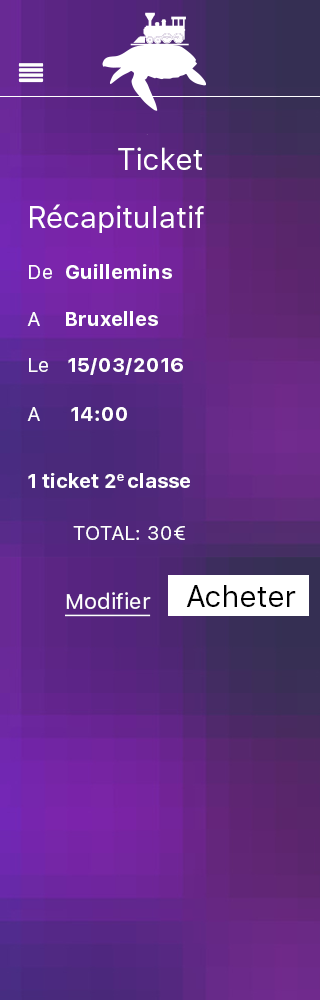
<style>
.page{position:relative;width:320px;height:1000px}
.page>*{position:absolute;margin:0}
.t1{font:30px "SFUIText-Regular";color:#ffffff}
.t2{font:20px "SFUIText-Bold";color:#ffffff}
.t3{font:20px "SFUIText-Regular";color:#ffffff}
.t4{font:22px "SFUIText-Regular";color:#ffffff;text-decoration:underline}
.t5{font:30px "SFUIText-Regular";color:#000000}
</style>
<div class="page">
<p class="t1" style="left:118px;top:147px;width:84px;height:23px">Ticket</p>
<p class="t1" style="left:30px;top:204px;width:174px;height:29px">Récapitulatif</p>
<p class="t2" style="left:29px;top:264px;width:143px;height:15px"><span class="t3">De  </span>Guillemins</p>
<p class="t2" style="left:27px;top:311px;width:131px;height:15px"><span class="t3">A    </span>Bruxelles</p>
<p class="t2" style="left:29px;top:358px;width:154px;height:17px"><span class="t3">Le   </span>15/03/2016</p>
<p class="t2" style="left:27px;top:407px;width:100px;height:14px"><span class="t3">A     </span>14:00</p>
<p class="t2" style="left:28px;top:473px;width:162px;height:15px">1 ticket 2e classe</p>
<p class="t3" style="left:73px;top:526px;width:112px;height:14px">TOTAL: 30€</p>
<p class="t4" style="left:65px;top:592px;width:86px;height:25px">Modifier</p>
<p class="t5" style="left:186px;top:585px;width:110px;height:22px">Acheter</p>
</div>
